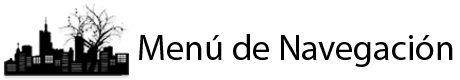
<style>
.page{position:relative;width:460px;height:80px;background:#ffffff}
.page>*{position:absolute;margin:0}
.t1{font:36px "MyriadPro-Regular";color:#000000}
</style>
<div class="page">
<p class="t1" style="left:139px;top:34px;width:314px;height:33px">Menú de Navegación</p>
</div>
